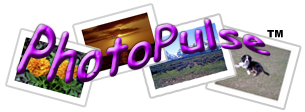
<style>
.page{position:relative;width:305px;height:112px;background:#ffffff}
.page>*{position:absolute;margin:0}
.t1{font:48px "ComicSansMS-Bold"}
.t2{font:10px "Arial-Black";color:#000000}
</style>
<div class="page">
<p class="t1" style="left:17px;top:19px;width:254px;height:65px">PhotoPulse</p>
<p class="t2" style="left:267px;top:30px;width:16px;height:8px">TM</p>
</div>
